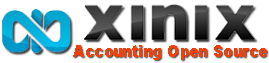
<style>
.page{position:relative;width:269px;height:63px;background:#ffffff}
.page>*{position:absolute;margin:0}
.t1{font:16.7px "Arial-Black";color:#f63f07;scale:0.87 1}
</style>
<div class="page">
<p class="t1" style="left:73px;top:45px;width:194px;height:15px">Accounting Open Source</p>
</div>
